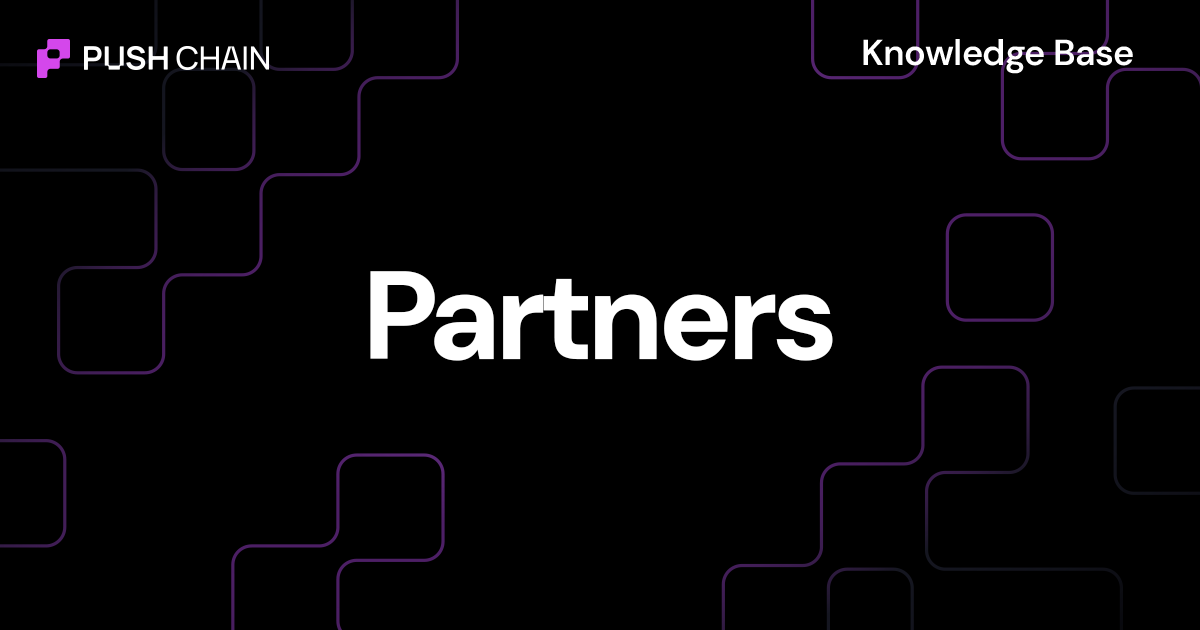
<style>
.page{position:relative;width:1200px;height:630px;background:#000000}
.page>*{position:absolute;margin:0}
.t1{font:36px "DMSans-SemiBold";letter-spacing:-0.02em;color:#ffffff}
.t2{font:124.7px "DMSans-Bold";letter-spacing:-0.05em;color:#ffffff}
</style>
<div class="page">
<p class="t1" style="left:863px;top:39px;width:270px;height:35px">Knowledge Base</p>
<p class="t2" style="left:370px;top:271px;width:463px;height:90px">Partners</p>
</div>
